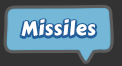
<style>
.page{position:relative;width:122px;height:66px;background:#333333}
.page>*{position:absolute;margin:0}
.t1{font:20px "CarterOne";letter-spacing:0.025em;color:#ffffff}
</style>
<div class="page">
<p class="t1" style="left:21px;top:19px;width:75px;height:17px">Missiles</p>
</div>
